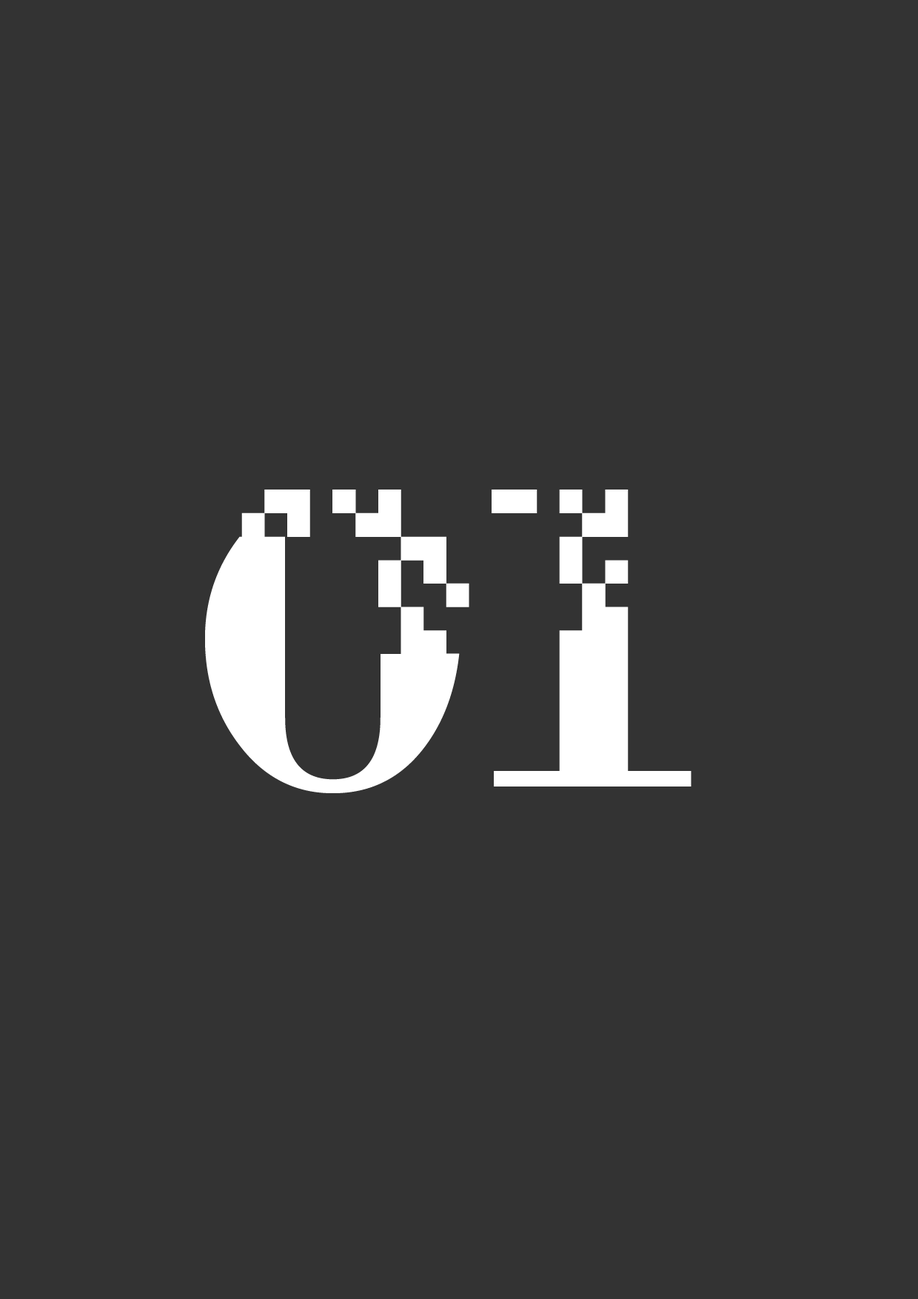
<style>
.page{position:relative;width:918px;height:1299px;background:#333333}
.page>*{position:absolute;margin:0}
.t1{font:444.3px "Neurotoxin";color:#ffffff}
</style>
<div class="page">
<p class="t1" style="left:205px;top:489px;width:487px;height:304px">01</p>
</div>
